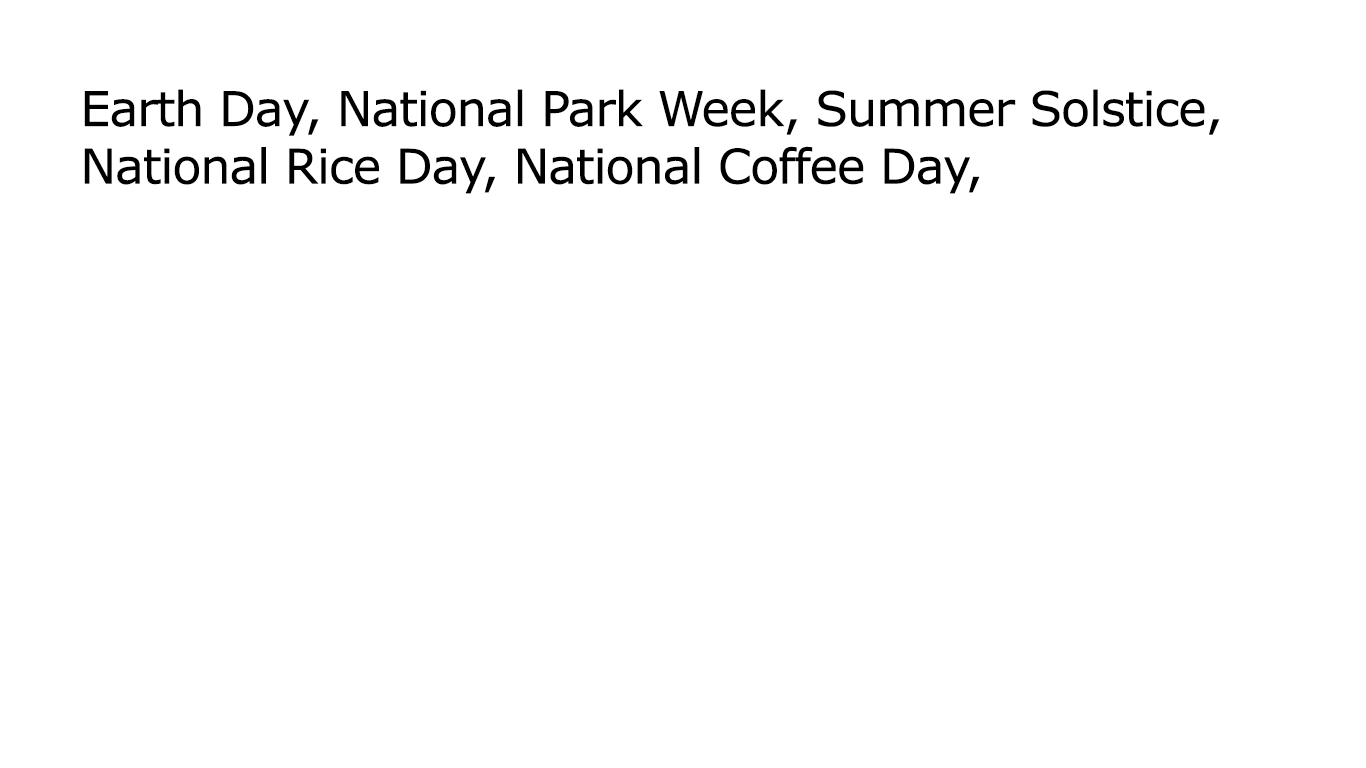
<style>
.page{position:relative;width:1366px;height:768px;background:#ffffff}
.page>*{position:absolute;margin:0}
.t1{font:48px "Verdana";letter-spacing:-0.025em;color:#000000}
</style>
<div class="page">
<p class="t1" style="left:84px;top:89px;width:1136px;height:105px">Earth Day, National Park Week, Summer Solstice, National Rice Day, National Coffee Day,</p>
</div>
